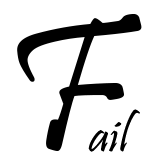
<style>
.page{position:relative;width:166px;height:166px;background:#ffffff}
.page>*{position:absolute;margin:0}
.t1{font:197.6px "Pristina-Regular";color:#000000}
.t2{font:50.8px "Pristina-Regular";color:#000000}
</style>
<div class="page">
<p class="t1" style="left:17px;top:14px;width:125px;height:137px">F</p>
<p class="t2" style="left:88px;top:109px;width:52px;height:43px">ail</p>
</div>
